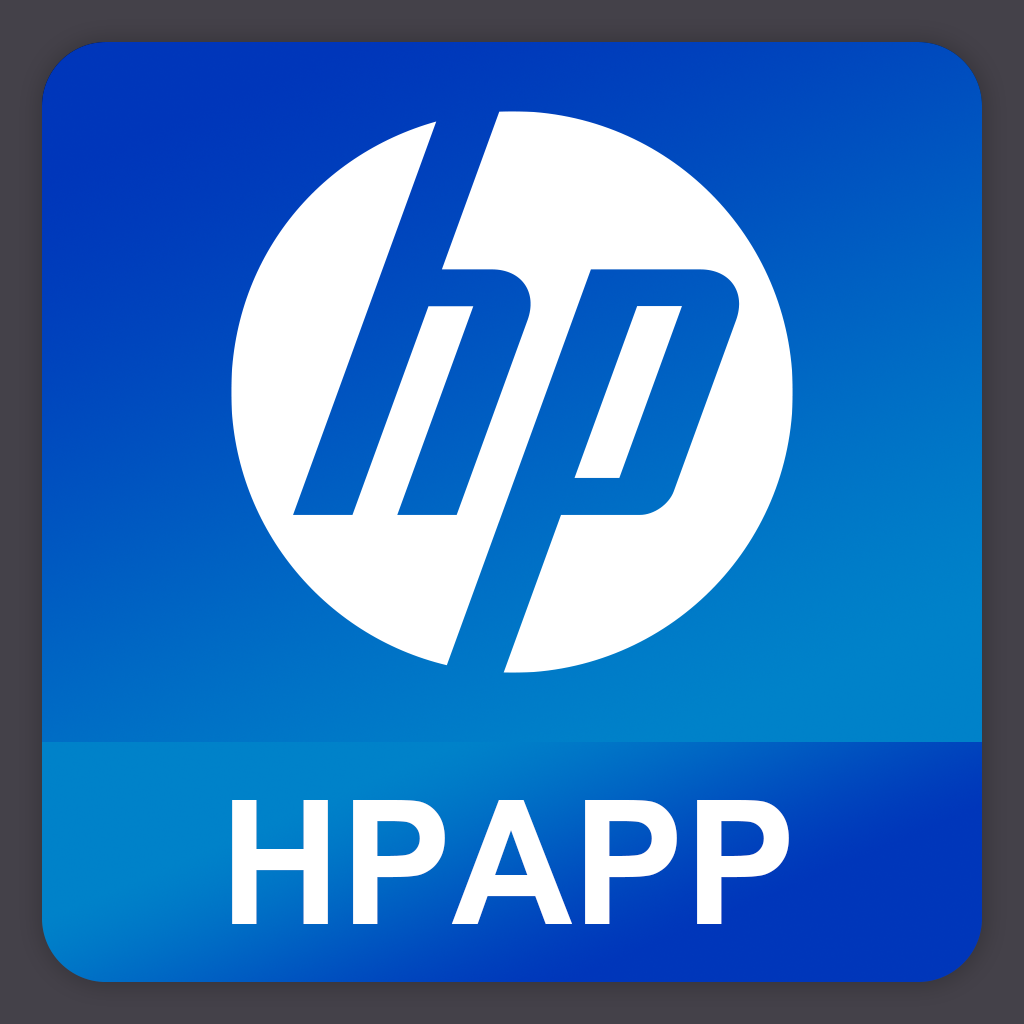
<style>
.page{position:relative;width:1024px;height:1024px}
.page>*{position:absolute;margin:0}
.t1{font:172.6px "Arial-BoldMT";color:#ffffff}
</style>
<div class="page">
<p class="t1" style="left:232px;top:800px;width:557px;height:124px">HPAPP</p>
</div>
